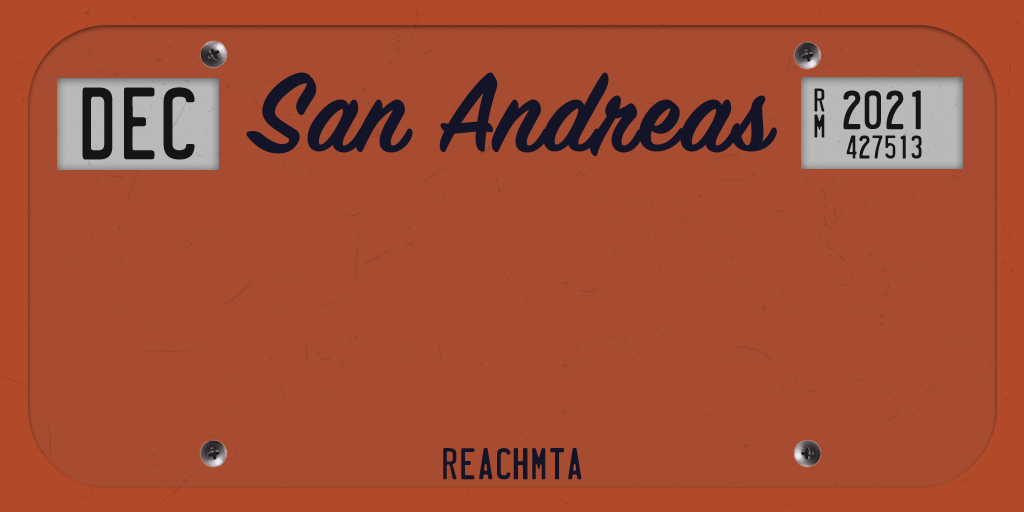
<style>
.page{position:relative;width:1024px;height:512px;background:#a74c30}
.page>*{position:absolute;margin:0}
.t1{font:120px "SignPainterHouseScript";color:#141428;font-weight:bold}
.t2{font:29.6px "LicensePlate";color:#151515}
.t3{font:49.4px "LicensePlate";color:#151515}
.t4{font:40px "LicensePlate";letter-spacing:0.005em;color:#141428}
</style>
<div class="page">
<p class="t1" style="left:246px;top:72px;width:531px;height:85px">San Andreas</p>
<p class="t2" style="left:814px;top:88px;width:11px;height:24px">R</p>
<p class="t3" style="left:843px;top:90px;width:78px;height:40px">2021</p>
<p class="t2" style="left:814px;top:114px;width:11px;height:24px">m</p>
<p class="t2" style="left:846px;top:135px;width:76px;height:24px">427513</p>
<p class="t4" style="left:443px;top:448px;width:139px;height:32px">REACHMTA</p>
</div>
